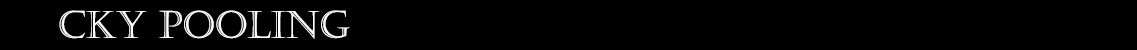
<style>
.page{position:relative;width:1137px;height:50px;background:#000000}
.page>*{position:absolute;margin:0}
.t1{font:37.5px "Castellar";color:#ffffff}
.t2{font:37.5px "Castellar";letter-spacing:-0.02em;color:#ffffff}
</style>
<div class="page">
<p class="t1" style="left:59px;top:10px;width:291px;height:29px">C<span class="t2">KY</span> POOLING</p>
</div>
